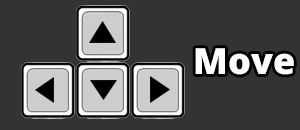
<style>
.page{position:relative;width:300px;height:130px;background:#333333}
.page>*{position:absolute;margin:0}
.t1{font:36px "OpenSans-Extrabold";color:#ffffff}
</style>
<div class="page">
<p class="t1" style="left:195px;top:48px;width:99px;height:27px">Move</p>
</div>
